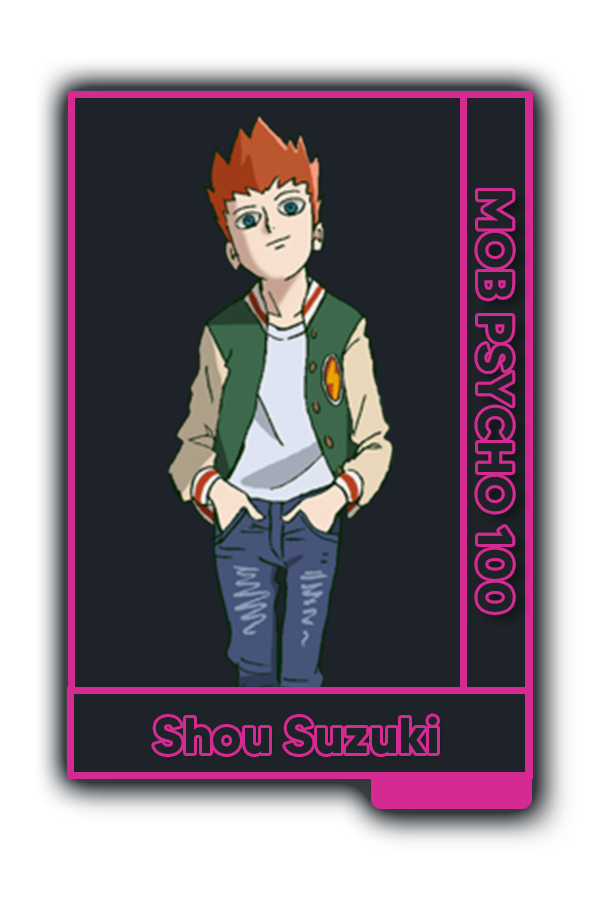
<style>
.page{position:relative;width:600px;height:900px;background:#1d2328}
.page>*{position:absolute;margin:0}
.t1{font:48.8px "MADETOMMY-Bold";color:#1d2328}
.t2{font:49.7px "MADETOMMY-Bold";color:#1d2328}
</style>
<div class="page">
<p class="t1" style="left:477px;top:191px;width:36px;height:421px;rotate:90deg">MOB PSYCHO 100</p>
<p class="t2" style="left:154px;top:716px;width:283px;height:38px">Shou Suzuki</p>
</div>
